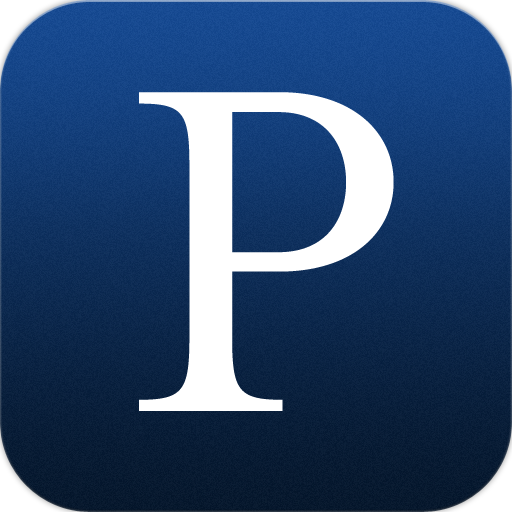
<style>
.page{position:relative;width:512px;height:512px}
.page>*{position:absolute;margin:0}
.t1{font:531px "MrsEavesSmallCapsSmallCaps";letter-spacing:-0.04em;color:#ffffff}
</style>
<div class="page">
<p class="t1" style="left:139px;top:92px;width:255px;height:319px">P</p>
</div>
